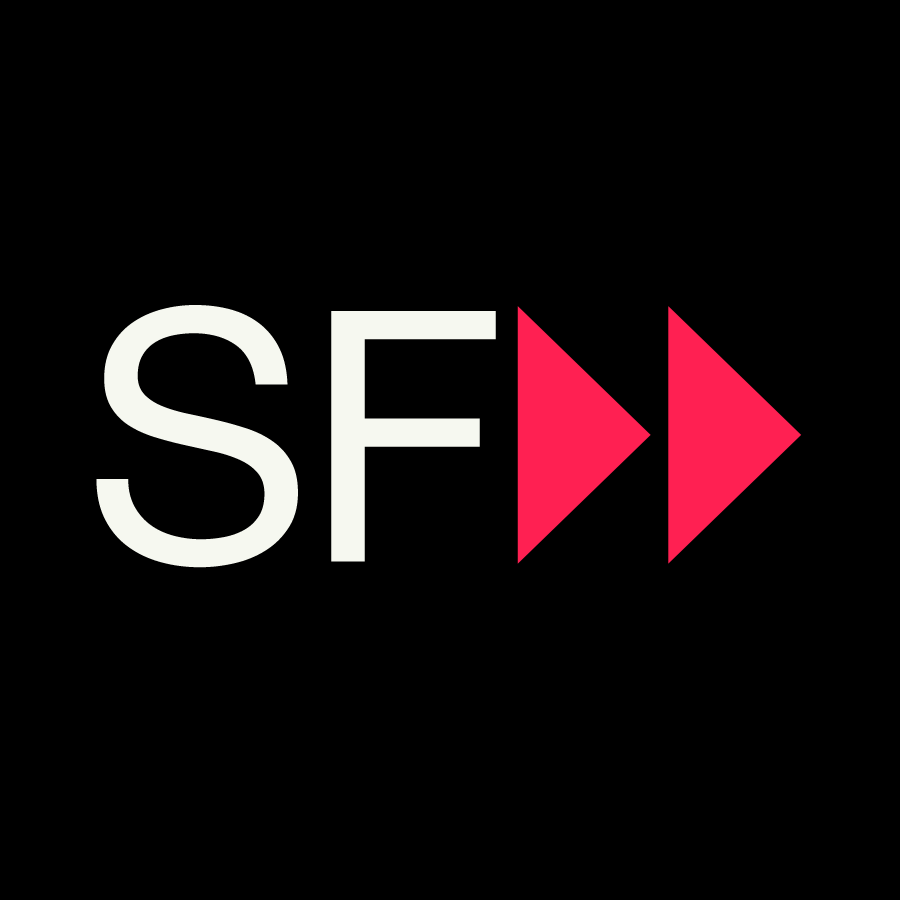
<style>
.page{position:relative;width:900px;height:900px;background:#000000}
.page>*{position:absolute;margin:0}
.t1{font:350.7px "HelveticaNeue";letter-spacing:-0.02em;color:#f6f8f0;text-transform:uppercase}
</style>
<div class="page">
<p class="t1" style="left:96px;top:305px;width:400px;height:263px">SF</p>
</div>
